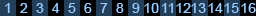
<style>
.page{position:relative;width:256px;height:16px;background:#233e58}
.page>*{position:absolute;margin:0}
.t1{font:14px "ArialMT";color:#99ccff}
</style>
<div class="page">
<p class="t1" style="left:5px;top:3px;width:5px;height:10px">1</p>
<p class="t1" style="left:20px;top:3px;width:8px;height:10px">2</p>
<p class="t1" style="left:36px;top:3px;width:8px;height:10px">3</p>
<p class="t1" style="left:52px;top:3px;width:8px;height:10px">4</p>
<p class="t1" style="left:68px;top:3px;width:8px;height:10px">5</p>
<p class="t1" style="left:84px;top:3px;width:8px;height:10px">6</p>
<p class="t1" style="left:100px;top:3px;width:8px;height:10px">7</p>
<p class="t1" style="left:116px;top:3px;width:8px;height:10px">8</p>
<p class="t1" style="left:132px;top:3px;width:8px;height:10px">9</p>
<p class="t1" style="left:144px;top:3px;width:15px;height:10px">10</p>
<p class="t1" style="left:162px;top:3px;width:11px;height:10px">11</p>
<p class="t1" style="left:176px;top:3px;width:15px;height:10px">12</p>
<p class="t1" style="left:191px;top:3px;width:15px;height:10px">13</p>
<p class="t1" style="left:208px;top:3px;width:15px;height:10px">14</p>
<p class="t1" style="left:224px;top:3px;width:15px;height:10px">15</p>
<p class="t1" style="left:241px;top:3px;width:15px;height:10px">16</p>
</div>
